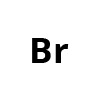
<style>
.page{position:relative;width:100px;height:100px;background:#ffffff}
.page>*{position:absolute;margin:0}
.t1{font:35px "OpenSans-Bold";color:#000000}
</style>
<div class="page">
<p class="t1" style="left:32px;top:38px;width:37px;height:25px">Br</p>
</div>
